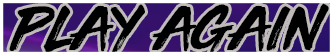
<style>
.page{position:relative;width:333px;height:55px;background:#000000}
.page>*{position:absolute;margin:0}
.t1{font:72px "ThirdRail";color:#000000}
</style>
<div class="page">
<p class="t1" style="left:9px;top:3px;width:320px;height:51px">play again</p>
</div>
